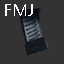
<style>
.page{position:relative;width:64px;height:64px;background:#333333}
.page>*{position:absolute;margin:0}
.t1{font:16px "MicrosoftYaHeiUI";color:#fafafa}
</style>
<div class="page">
<p class="t1" style="left:5px;top:4px;width:28px;height:12px">FMJ</p>
</div>
